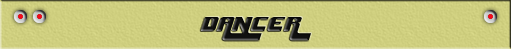
<style>
.page{position:relative;width:511px;height:49px}
.page>*{position:absolute;margin:0}
.t1{font:30px "HuskyStash";color:#10100f}
</style>
<div class="page">
<p class="t1" style="left:200px;top:17px;width:111px;height:24px">DANCER</p>
</div>
